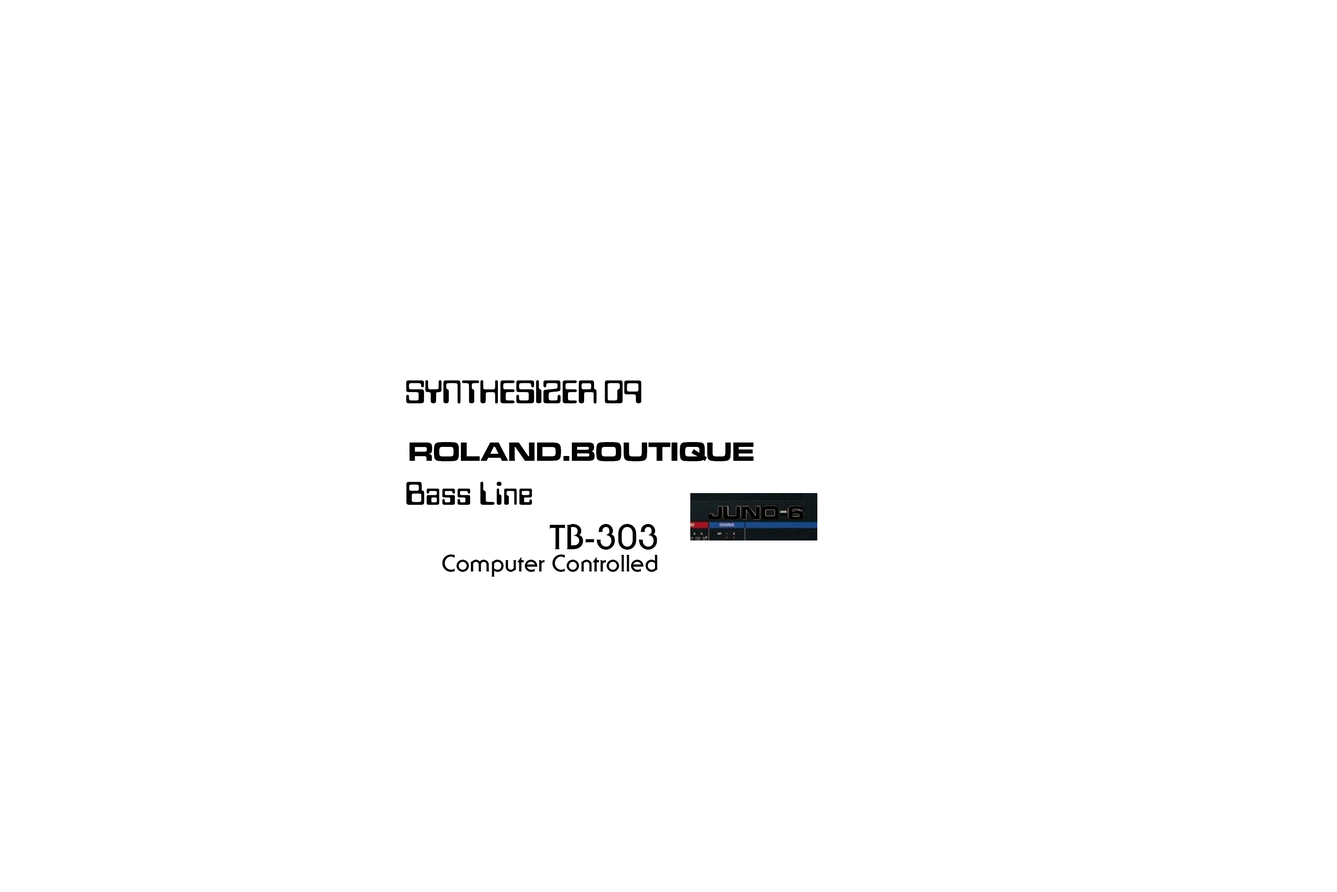
<style>
.page{position:relative;width:1337px;height:892px;background:#ffffff}
.page>*{position:absolute;margin:0}
.t1{font:34.5px "DataSeventyLetPlain";letter-spacing:-0.025em;color:#000000}
.t2{font:27.3px "MicrogrammaD-BoldExte";color:#000000}
.t3{font:34.5px "DataSeventyLetPlain";color:#000000}
.t4{font:19.1px "MicrogrammaD-BoldExte";color:#000000}
.t5{font:34.5px "SerifGothicLT-Bold";color:#000000}
.t6{font:23.2px "SerifGothicLT-Bold";color:#000000}
</style>
<div class="page">
<p class="t1" style="left:406px;top:380px;width:236px;height:24px">SYNTHESIZER 09</p>
<p class="t2" style="left:410px;top:442px;width:344px;height:19px">ROLAND.BOUTIQUE</p>
<p class="t3" style="left:406px;top:482px;width:126px;height:23px">Bass Line</p>
<p class="t4" style="left:709px;top:506px;width:95px;height:13px">JUNO-6</p>
<p class="t5" style="left:550px;top:524px;width:107px;height:25px">TB-303</p>
<p class="t6" style="left:442px;top:554px;width:216px;height:22px">Computer Controlled</p>
</div>
